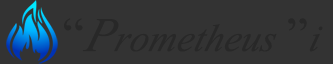
<style>
.page{position:relative;width:333px;height:64px;background:#333333}
.page>*{position:absolute;margin:0}
.t1{font:48px "Aparajita-Italic";color:#282828;font-style:italic}
.t2{font:60px "Aparajita";color:#282828}
.t3{font:60px "Aparajita-Italic";color:#282828;font-style:italic}
</style>
<div class="page">
<p class="t1" style="left:64px;top:18px;width:259px;height:34px"><span class="t2">“</span><span class="t3">P</span>rometheus <span class="t2">”</span>i</p>
</div>
